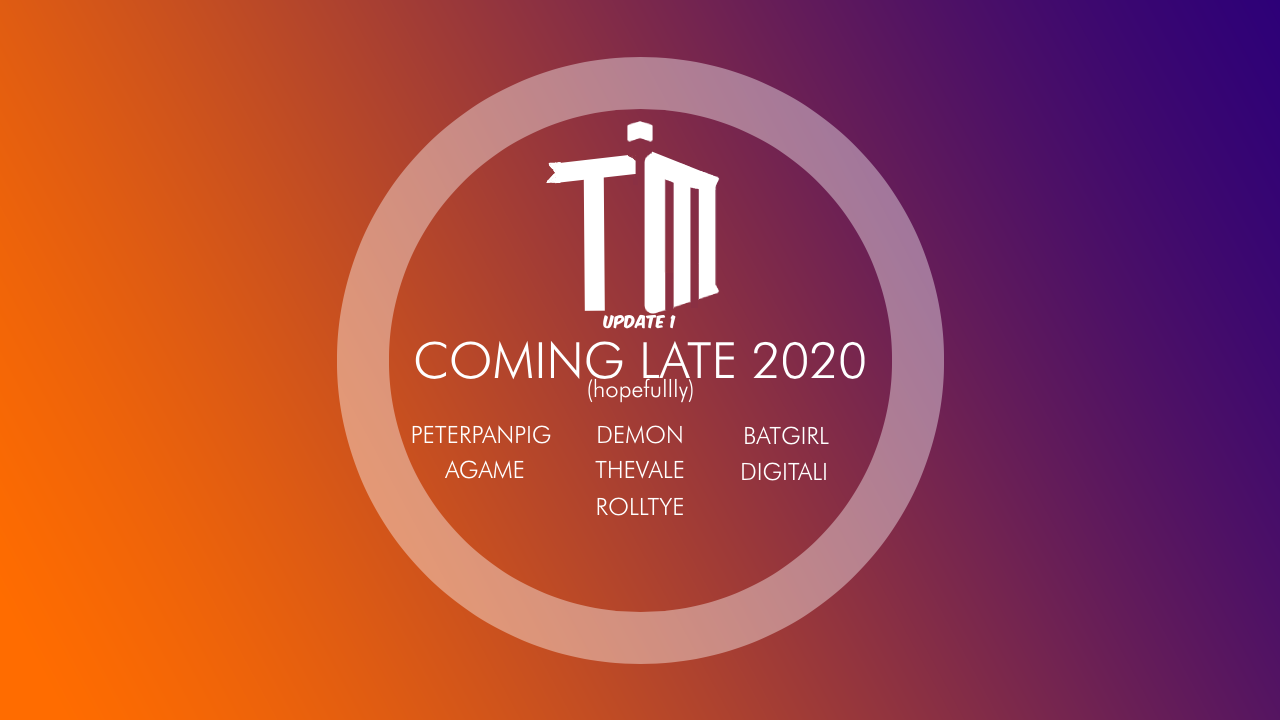
<style>
.page{position:relative;width:1280px;height:720px}
.page>*{position:absolute;margin:0}
.t1{font:15px "KomikaAxis";color:#ffffff}
.t2{font:50px "FuturaBT-Light";color:#ffffff}
.t3{font:23.9px "FuturaBT-Light";color:#ffffff}
</style>
<div class="page">
<p class="t1" style="left:603px;top:314px;width:73px;height:15px">Update 1</p>
<p class="t2" style="left:415px;top:340px;width:450px;height:40px">COMING LATE 2020</p>
<p class="t3" style="left:588px;top:378px;width:105px;height:25px">(hopefullly)</p>
<p class="t3" style="left:412px;top:425px;width:139px;height:19px">PETERPANPIG</p>
<p class="t3" style="left:598px;top:425px;width:84px;height:19px">DEMON</p>
<p class="t3" style="left:745px;top:426px;width:84px;height:19px">BATGIRL</p>
<p class="t3" style="left:444px;top:460px;width:80px;height:19px">AGAME</p>
<p class="t3" style="left:595px;top:460px;width:89px;height:19px">THEVALE</p>
<p class="t3" style="left:742px;top:462px;width:84px;height:19px">DIGITALI</p>
<p class="t3" style="left:597px;top:497px;width:86px;height:19px">ROLLTYE</p>
</div>
